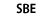
<style>
.page{position:relative;width:39px;height:16px;background:#ffffff}
.page>*{position:absolute;margin:0}
.t1{font:12px "AdobeGothicStd-Bold";letter-spacing:-0.025em;color:#000000}
</style>
<div class="page">
<p class="t1" style="left:16px;top:3px;width:20px;height:11px">SBE</p>
</div>
